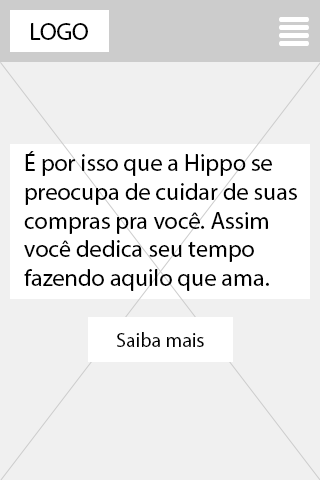
<style>
.page{position:relative;width:320px;height:480px;background:#f0f0f0}
.page>*{position:absolute;margin:0}
.t1{font:12px "MyriadPro-Regular";color:#000000}
.t2{font:20px "MyriadPro-Regular";color:#010101}
</style>
<div class="page">
<p class="t1" style="left:31px;top:23px;width:57px;height:17px">LOGO</p>
<p class="t1" style="left:24px;top:151px;width:273px;height:140px">É por isso que a Hippo se<br>preocupa de cuidar de suas<br>compras pra você. Assim<br>você dedica seu tempo<br>fazendo aquilo que ama.</p>
<p class="t2" style="left:117px;top:332px;width:87px;height:15px">Saiba mais</p>
</div>
